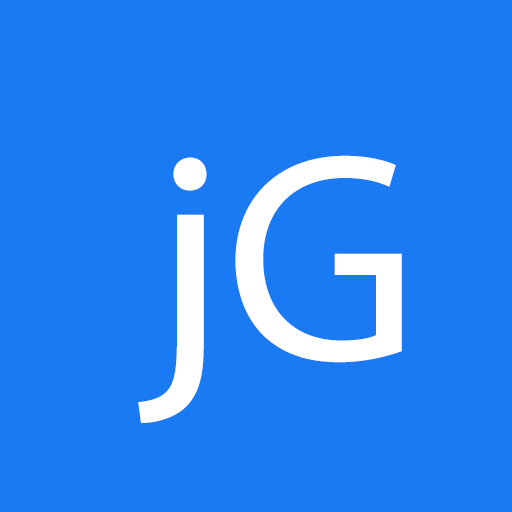
<style>
.page{position:relative;width:512px;height:512px;background:#197af4}
.page>*{position:absolute;margin:0}
.t1{font:300px "MyriadPro-Regular";color:#ffffff}
</style>
<div class="page">
<p class="t1" style="left:138px;top:155px;width:264px;height:268px">jG</p>
</div>
